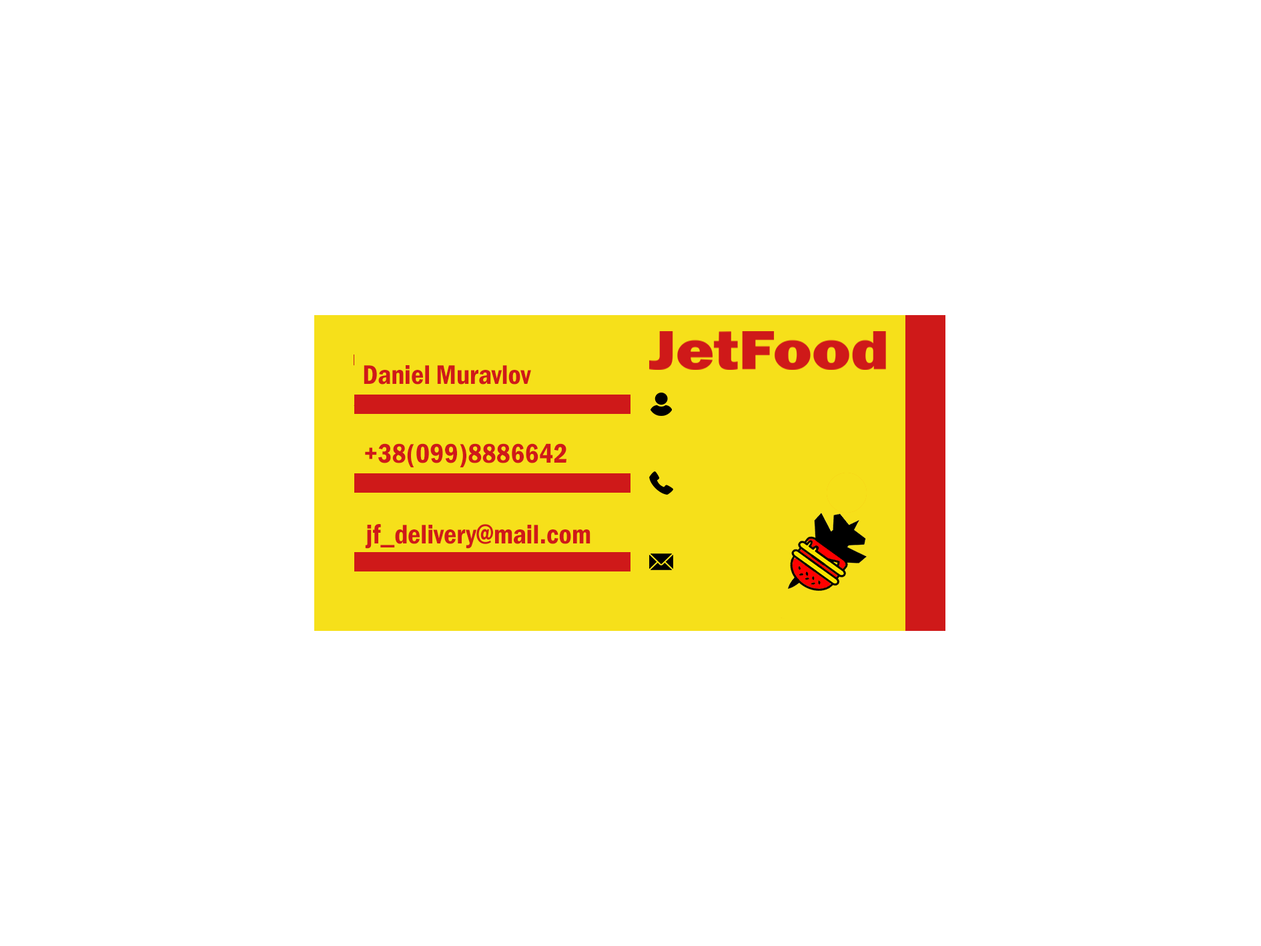
<style>
.page{position:relative;width:1261px;height:946px;background:#ffffff}
.page>*{position:absolute;margin:0}
.t1{font:27.8px "FranklinGothic-DemiCond";color:#cf1919}
.t2{font:27.8px "FranklinGothic-DemiCond";color:#f6e01a}
</style>
<div class="page">
<p class="t1" style="left:352px;top:365px;width:285px;height:23px"><span class="t2">L</span>Daniel Muravlov <span class="t2">em Ipsum</span></p>
<p class="t1" style="left:354px;top:443px;width:315px;height:24px"><span class="t2">L</span>+38(099)8886642<span class="t2">em Ipsum</span></p>
<p class="t1" style="left:359px;top:524px;width:232px;height:24px"><span class="t2">j</span>jf_delivery@mail.com</p>
</div>
